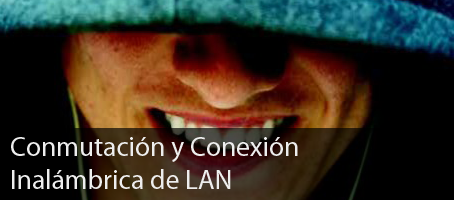
<style>
.page{position:relative;width:454px;height:200px;background:#000000}
.page>*{position:absolute;margin:0}
.t1{font:27.4px "MyriadPro-Regular";color:#eeeeee}
</style>
<div class="page">
<p class="t1" style="left:11px;top:137px;width:287px;height:52px">Conmutación y Conexión<br>Inalámbrica de LAN</p>
</div>
